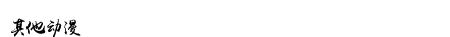
<style>
.page{position:relative;width:450px;height:37px;background:#ffffff}
.page>*{position:absolute;margin:0}
.t1{font:18px "yuweij";color:#000000}
</style>
<div class="page">
<p class="t1" style="left:11px;top:18px;width:70px;height:20px">其他动漫</p>
</div>
